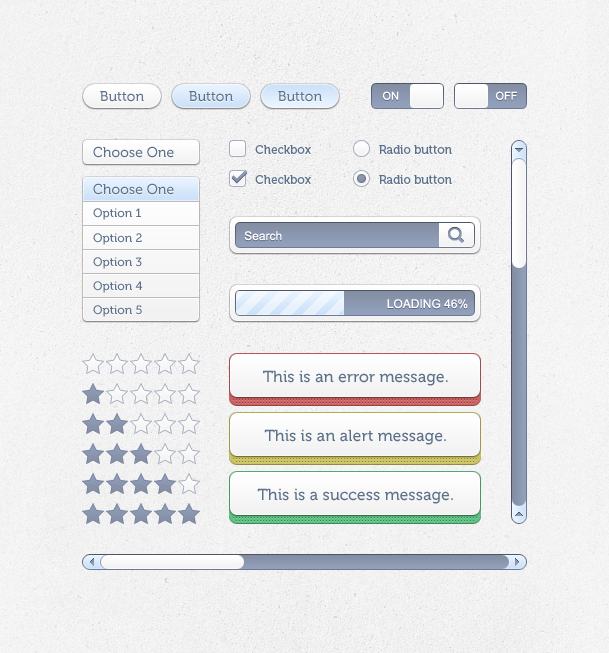
<style>
.page{position:relative;width:609px;height:653px}
.page>*{position:absolute;margin:0}
.t1{font:14px "Museo-500";color:#5d728a}
.t2{font:11px "ArialMT";color:#ffffff}
.t3{font:12px "Museo-500";color:#5d728a}
.t4{font:12px/20px "Museo-500";color:#5d728a}
.t5{font:12px "ArialMT";color:#fefeff}
.t6{font:16px "Museo-500";color:#5d728a}
</style>
<div class="page">
<p class="t1" style="left:100px;top:91px;width:44px;height:11px">Button</p>
<p class="t1" style="left:189px;top:91px;width:44px;height:11px">Button</p>
<p class="t1" style="left:278px;top:91px;width:44px;height:11px">Button</p>
<p class="t2" style="left:383px;top:91px;width:16px;height:9px">ON</p>
<p class="t2" style="left:496px;top:91px;width:21px;height:9px">OFF</p>
<p class="t1" style="left:93px;top:146px;width:81px;height:12px">Choose One</p>
<p class="t3" style="left:255px;top:145px;width:56px;height:9px">Checkbox</p>
<p class="t3" style="left:379px;top:145px;width:73px;height:9px">Radio button</p>
<p class="t1" style="left:93px;top:183px;width:81px;height:12px">Choose One</p>
<p class="t3" style="left:255px;top:175px;width:56px;height:9px">Checkbox</p>
<p class="t3" style="left:379px;top:175px;width:73px;height:9px">Radio button</p>
<p class="t4" style="left:93px;top:208px;width:50px;height:109px">Option 1<br>Option 2<br>Option 3<br>Option 4<br>Option 5</p>
<p class="t5" style="left:244px;top:231px;width:38px;height:10px">Search</p>
<p class="t5" style="left:387px;top:299px;width:81px;height:10px">LOADING 46%</p>
<p class="t6" style="left:263px;top:370px;width:185px;height:16px">This is an error message.</p>
<p class="t6" style="left:264px;top:429px;width:182px;height:16px">This is an alert message.</p>
<p class="t6" style="left:257px;top:488px;width:196px;height:16px">This is a success message.</p>
</div>
